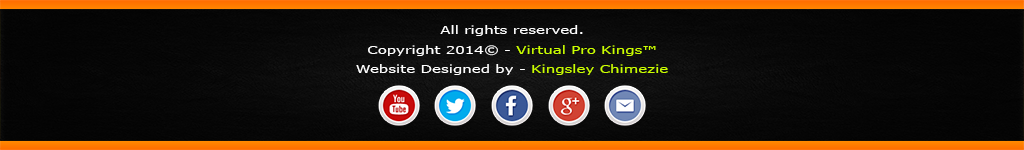
<style>
.page{position:relative;width:1024px;height:150px}
.page>*{position:absolute;margin:0}
.t1{font:11.3px "Verdana";letter-spacing:0.01em;color:#ffffff;scale:1.31 1}
.t2{font:11.3px "Verdana";letter-spacing:0.01em;color:#ccff00;scale:1.31 1}
</style>
<div class="page">
<p class="t1" style="left:356px;top:25px;width:312px;height:50px;text-align:center">All rights reserved.<br>Copyright 2014© - <span class="t2">Virtual Pro Kings™<br></span>Website Designed by - <span class="t2">Kingsley Chimezie</span></p>
</div>
